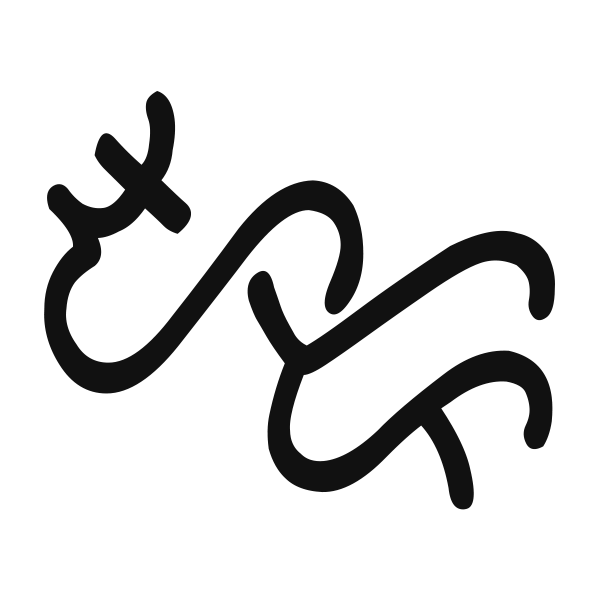
<style>
.page{position:relative;width:600px;height:600px;background:#ffffff}
.page>*{position:absolute;margin:0}
.t1{font:505.1px "BaybayinDoctrina1593";color:#111111;scale:0.73 1}
</style>
<div class="page">
<p class="t1" style="left:44px;top:91px;width:320px;height:303px">A</p>
<p class="t1" style="left:247px;top:230px;width:308px;height:280px">R</p>
</div>
